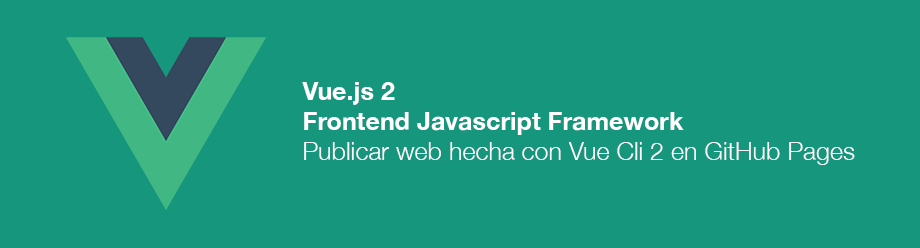
<style>
.page{position:relative;width:920px;height:248px;background:#15967d}
.page>*{position:absolute;margin:0}
.t1{font:25px "HelveticaNeue-Light";color:#ffffff}
.t2{font:25px "HelveticaNeue-Bold";color:#ffffff}
</style>
<div class="page">
<p class="t1" style="left:302px;top:82px;width:553px;height:83px"><span class="t2">Vue.js 2<br>Frontend Javascript Framework<br></span>Publicar web hecha con Vue Cli 2 en GitHub Pages</p>
</div>
